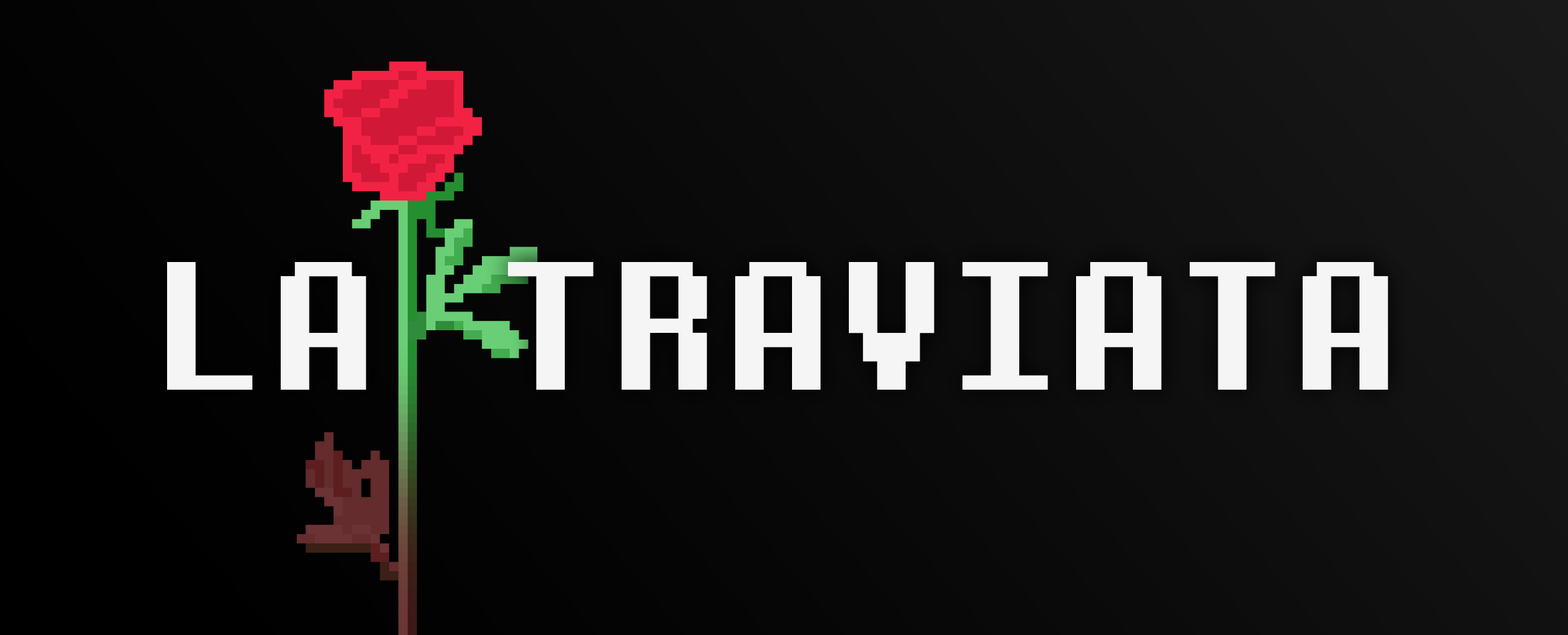
<style>
.page{position:relative;width:1568px;height:635px}
.page>*{position:absolute;margin:0}
.t1{font:189.3px "DeterminationMono";color:#f5f5f5}
</style>
<div class="page">
<p class="t1" style="left:167px;top:262px;width:1221px;height:128px">LA TRAVIATA</p>
</div>
